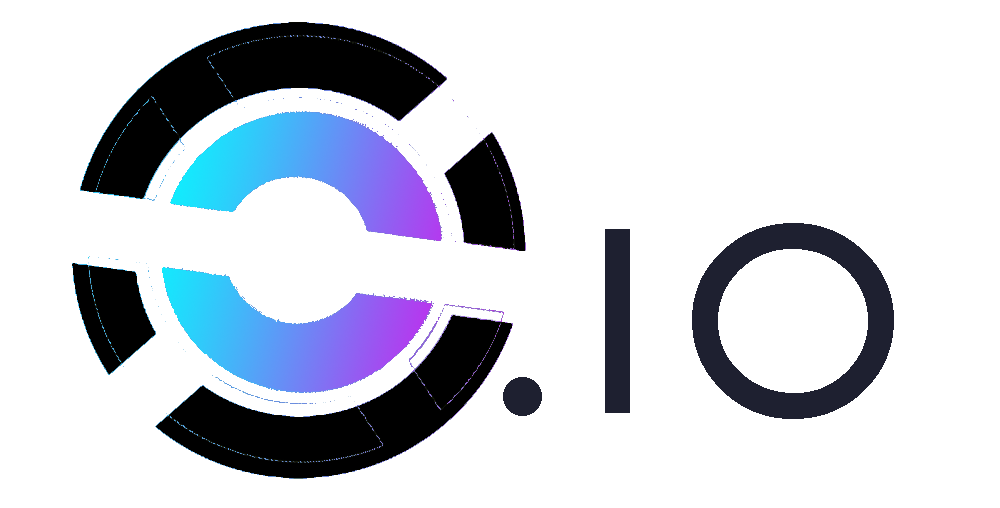
<style>
.page{position:relative;width:1000px;height:508px;background:#ffffff}
.page>*{position:absolute;margin:0}
.t1{font:296px "TwCenMT-Regular";letter-spacing:0.1em;color:#1e2030}
</style>
<div class="page">
<p class="t1" style="left:503px;top:223px;width:391px;height:196px">.IO</p>
</div>
